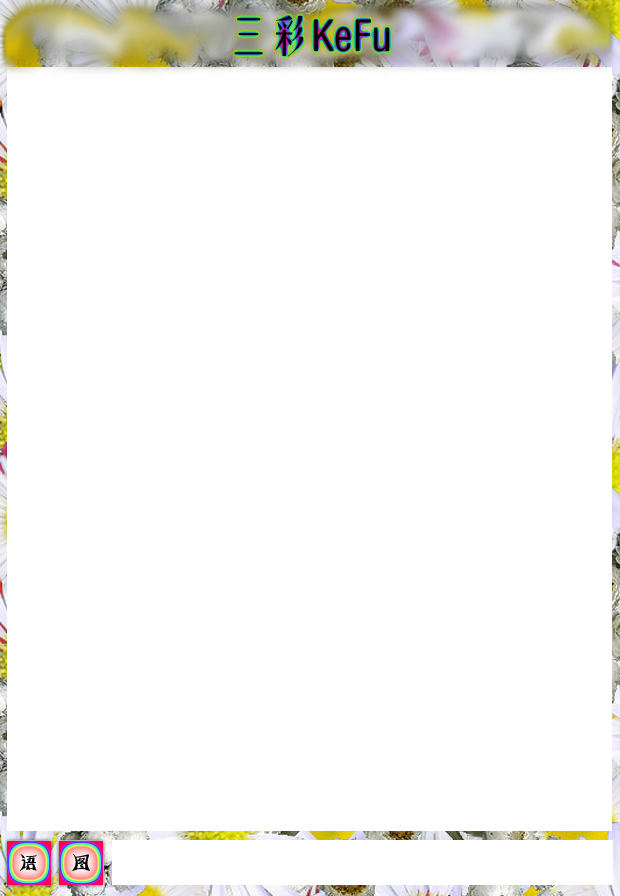
<style>
.page{position:relative;width:620px;height:896px;background:#ffffff}
.page>*{position:absolute;margin:0}
.t1{font:42.1px "FZYTK--GBK1-0";color:#000000}
.t2{font:21.5px "HYk5gj";color:#000000}
</style>
<div class="page">
<p class="t1" style="left:234px;top:15px;width:155px;height:42px">三彩KeFu</p>
<p class="t2" style="left:20px;top:854px;width:17px;height:17px">语</p>
<p class="t2" style="left:71px;top:854px;width:19px;height:18px">图</p>
</div>
